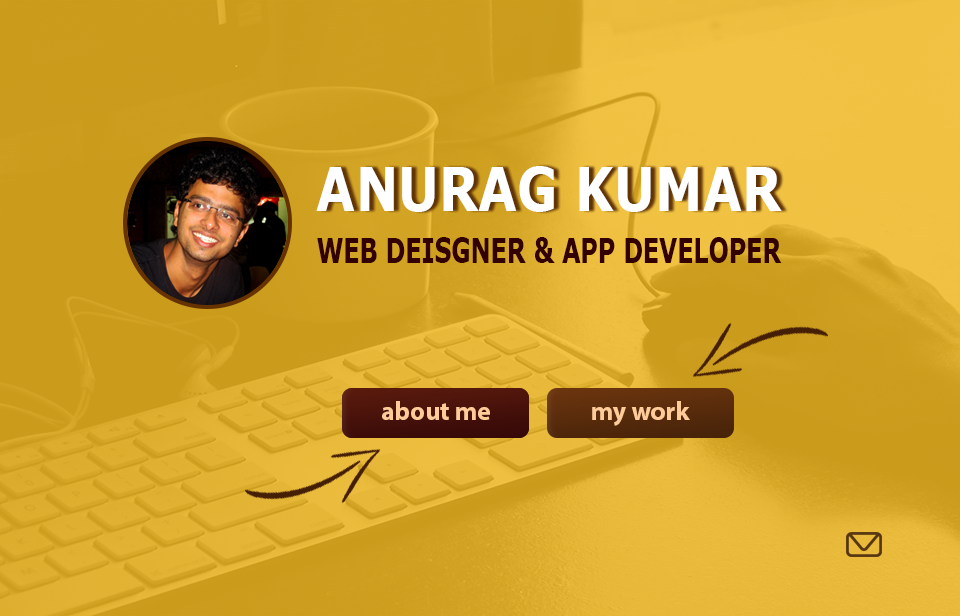
<style>
.page{position:relative;width:960px;height:616px}
.page>*{position:absolute;margin:0}
.t1{font:61.2px "Verdana-Bold";color:#ffffff;scale:0.82 1}
.t2{font:34.9px "Verdana-Bold";color:#330000;scale:0.68 1}
.t3{font:26.3px "MyriadPro-Bold";color:#ffcc99}
</style>
<div class="page">
<p class="t1" style="left:316px;top:166px;width:466px;height:46px">ANURAG KUMAR</p>
<p class="t2" style="left:317px;top:237px;width:465px;height:26px">WEB DEISGNER &amp; APP DEVELOPER</p>
<p class="t3" style="left:382px;top:401px;width:108px;height:19px">about me</p>
<p class="t3" style="left:592px;top:401px;width:98px;height:25px">my work</p>
</div>
